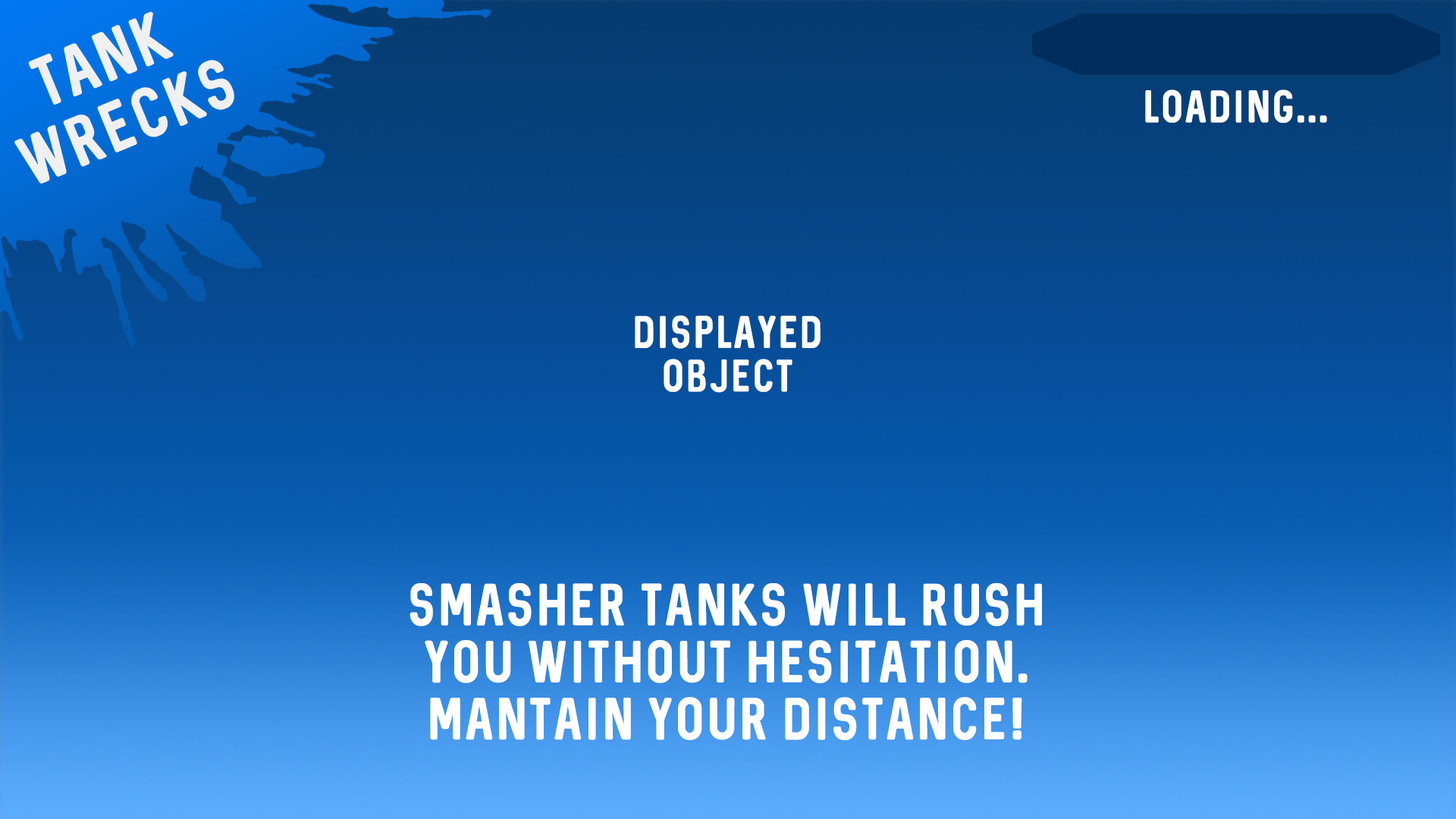
<style>
.page{position:relative;width:1456px;height:819px}
.page>*{position:absolute;margin:0}
.t1{font:36.4px "Sequel-Regular";letter-spacing:0.075em;color:#ffffff;text-transform:uppercase;scale:0.95 1}
.t2{font:47.5px "Sequel-Regular";letter-spacing:0.075em;color:#ffffff;text-transform:uppercase;scale:0.95 1}
</style>
<div class="page">
<p class="t1" style="left:1145px;top:89px;width:182px;height:34px">loading...</p>
<p class="t1" style="left:635px;top:315px;width:186px;height:78px;text-align:center">displayed<br>object</p>
<p class="t2" style="left:409px;top:583px;width:633px;height:157px;text-align:center">Smasher tanks will rush<br>you without hesitation.<br>Mantain your distance!</p>
</div>
